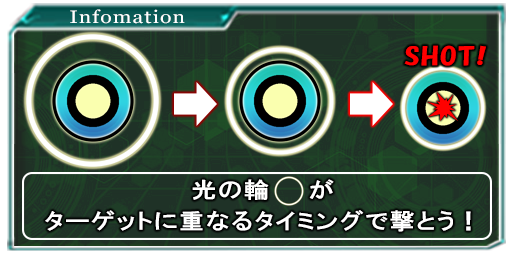
<style>
.page{position:relative;width:512px;height:256px}
.page>*{position:absolute;margin:0}
.t1{font:18.1px "Vani";letter-spacing:0.05em;color:#ffffff;scale:1.17 1}
.t2{font:24px "HGPSoeiKakupoptai";letter-spacing:0.05em;color:#ff0000;scale:1.15 1}
.t3{font:22px "HGPGothicE";letter-spacing:0.05em;color:#ffffff;scale:1.15 1}
</style>
<div class="page">
<p class="t1" style="left:70px;top:9px;width:115px;height:15px">Infomation</p>
<p class="t2" style="left:404px;top:45px;width:82px;height:21px">SHOT!</p>
<p class="t3" style="left:192px;top:179px;width:142px;height:21px">光の輪    が</p>
<p class="t3" style="left:45px;top:210px;width:426px;height:22px">ターゲットに重なるタイミングで撃とう！</p>
</div>
